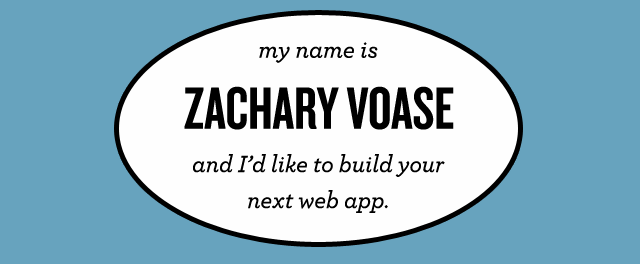
<style>
.page{position:relative;width:640px;height:264px;background:#67a3be}
.page>*{position:absolute;margin:0}
.t1{font:43px "Archer-MediumItalic";color:#000000}
.t2{font:106px "Knockout-HTF48-Featherweight";color:#000000}
.t3{font:42px/36px "Archer-MediumItalic";color:#000000}
</style>
<div class="page">
<p class="t1" style="left:259px;top:42px;width:119px;height:21px">my name is</p>
<p class="t2" style="left:184px;top:86px;width:270px;height:44px">ZACHARY VOASE</p>
<p class="t3" style="left:193px;top:154px;width:252px;height:59px;text-align:center">and I’d like to build your<br>next web app.</p>
</div>
